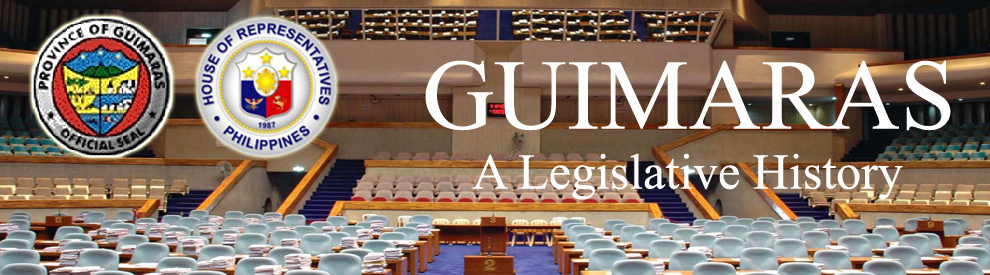
<style>
.page{position:relative;width:990px;height:275px}
.page>*{position:absolute;margin:0}
.t1{font:50px "TimesNewRomanPSMT";color:#fdfcfc}
.t2{font:100px "TimesNewRomanPSMT";color:#fdfdfd}
</style>
<div class="page">
<p class="t1" style="left:425px;top:60px;width:526px;height:140px;text-align:center"><span class="t2">GUIMARAS<br></span>A Legislative History</p>
</div>
